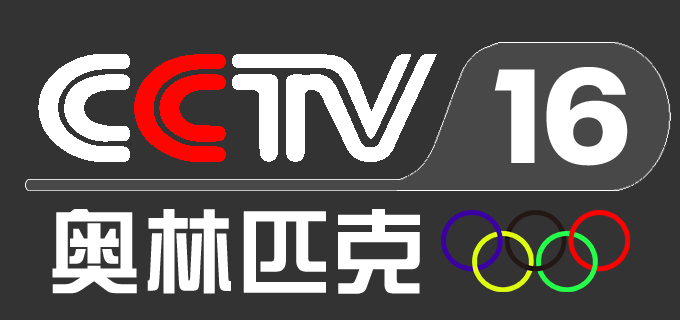
<style>
.page{position:relative;width:680px;height:320px;background:#333333}
.page>*{position:absolute;margin:0}
.t1{font:132.2px "NeuePlak-Black";color:#ffffff}
.t2{font:92.5px "ç»å¸ç»¼èºä½ç®-regular";color:#ffffff;font-weight:bold}
</style>
<div class="page">
<p class="t1" style="left:494px;top:67px;width:134px;height:99px">16</p>
<p class="t2" style="left:52px;top:209px;width:368px;height:85px">奥林匹克</p>
</div>
